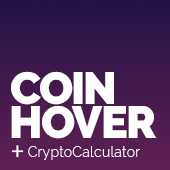
<style>
.page{position:relative;width:170px;height:170px}
.page>*{position:absolute;margin:0}
.t1{font:45px "Raleway-Black";letter-spacing:-0.02em;color:#ffffff}
.t2{font:36px "Raleway-Light";letter-spacing:-0.02em;color:#ffffff}
.t3{font:14px "Raleway-Light";letter-spacing:0.02em;color:#ffffff}
</style>
<div class="page">
<p class="t1" style="left:11px;top:71px;width:103px;height:34px">COIN</p>
<p class="t1" style="left:11px;top:105px;width:146px;height:34px">HOVER</p>
<p class="t2" style="left:11px;top:145px;width:13px;height:13px">+</p>
<p class="t3" style="left:28px;top:146px;width:112px;height:14px">CryptoCalculator</p>
</div>
